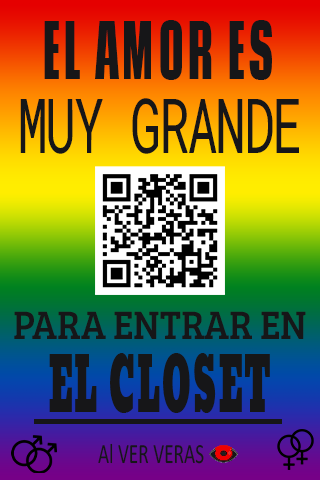
<style>
.page{position:relative;width:320px;height:480px}
.page>*{position:absolute;margin:0}
.t1{font:75.4px "CodaCaption-ExtraBold";color:#161618;scale:0.48 1}
.t2{font:75.9px "RobotoMono-Regular";letter-spacing:-0.05em;color:#161618;scale:0.68 1}
.t3{font:41.1px "BreeSerif-Regular";color:#161618;scale:0.91 1}
.t4{font:74.5px "Moul-Regular";letter-spacing:0.04em;color:#161618;scale:0.46 1}
.t5{font:28.1px "Calibri";color:#161618;scale:0.69 1}
</style>
<div class="page">
<p class="t1" style="left:44px;top:20px;width:228px;height:60px">EL AMOR ES</p>
<p class="t2" style="left:20px;top:98px;width:279px;height:56px">MUY GRANDE</p>
<p class="t3" style="left:14px;top:311px;width:292px;height:28px">PARA ENTRAR EN</p>
<p class="t4" style="left:49px;top:353px;width:221px;height:60px">EL CLOSET</p>
<p class="t5" style="left:98px;top:443px;width:106px;height:21px">Al VER VERAS</p>
</div>
